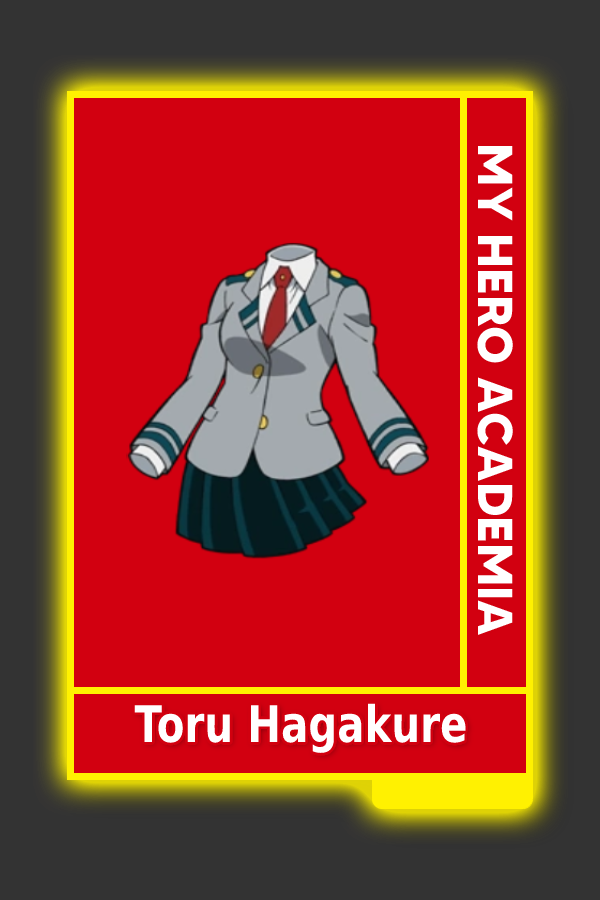
<style>
.page{position:relative;width:600px;height:900px;background:#d20010}
.page>*{position:absolute;margin:0}
.t1{font:48.8px "MADETOMMY-Bold";color:#ffffff}
.t2{font:50.5px "MADETOMMY-Bold";color:#ffffff;scale:0.8 1}
</style>
<div class="page">
<p class="t1" style="left:477px;top:146px;width:36px;height:489px;rotate:90deg">MY HERO ACADEMIA</p>
<p class="t2" style="left:134px;top:703px;width:332px;height:50px">Toru Hagakure</p>
</div>
